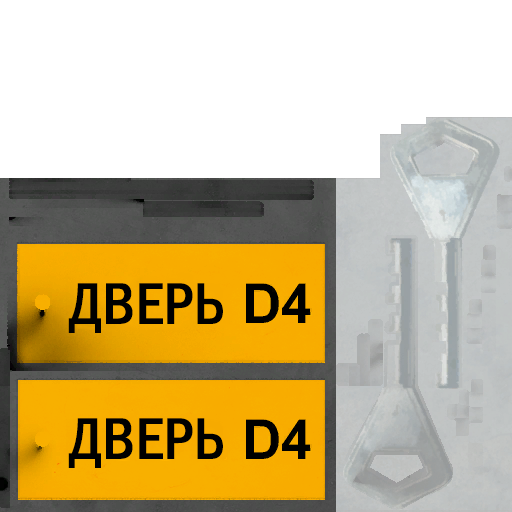
<style>
.page{position:relative;width:512px;height:512px;background:#ffffff}
.page>*{position:absolute;margin:0}
.t1{font:59px "FranklinGothicMediCondSCC";color:#000000}
</style>
<div class="page">
<p class="t1" style="left:68px;top:283px;width:155px;height:50px">ДВЕРЬ</p>
<p class="t1" style="left:68px;top:418px;width:155px;height:50px">ДВЕРЬ</p>
</div>
